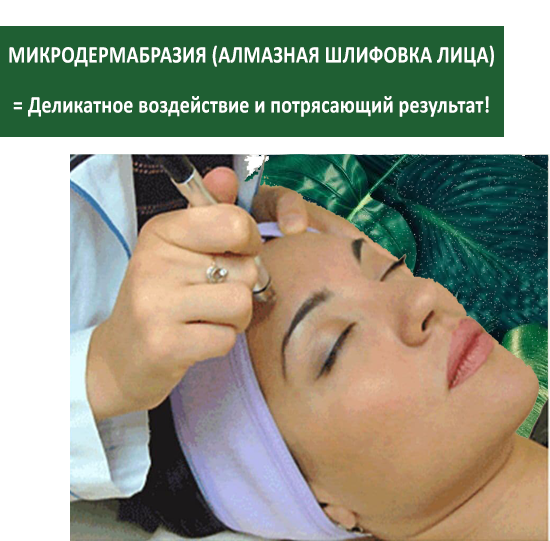
<style>
.page{position:relative;width:550px;height:541px}
.page>*{position:absolute;margin:0}
.t1{font:24px/30px "Calibri-Bold";letter-spacing:0.01em;color:#ffffff;scale:0.83 1}
.t2{font:24px/50px "Calibri-Bold";letter-spacing:0.01em;color:#ffffff;scale:0.83 1}
</style>
<div class="page">
<p class="t1" style="left:9px;top:45px;width:485px;height:72px;text-align:center">МИКРОДЕРМАБРАЗИЯ (АЛМАЗНАЯ ШЛИФОВКА ЛИЦА)<br>= Деликатное воздействие и потрясающий <span class="t2">результат!</span></p>
</div>
